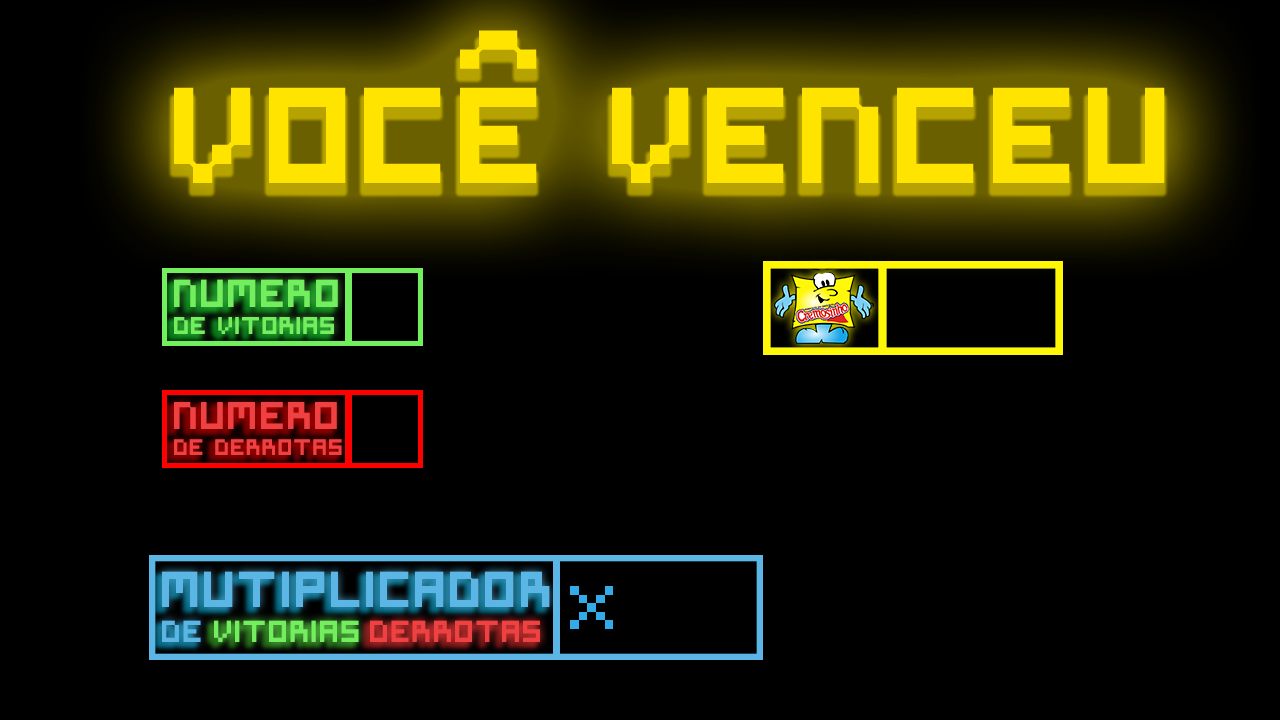
<style>
.page{position:relative;width:1280px;height:720px;background:#000000}
.page>*{position:absolute;margin:0}
.t1{font:23.2px "Symtext";color:#73ee5e}
.t2{font:37.2px "Symtext";color:#73ee5e}
.t3{font:21.6px "Symtext";color:#ef4141}
.t4{font:37px "Symtext";color:#ef4141}
.t5{font:48px "Symtext";color:#5bb6e5}
.t6{font:29px "Symtext";color:#5bb6e5}
.t7{font:29px "Symtext";color:#73ee5e}
.t8{font:29px "Symtext";color:#ef4141}
</style>
<div class="page">
<p class="t1" style="left:174px;top:279px;width:164px;height:55px"><span class="t2">NUMERO <br></span>DE VITORIAS</p>
<p class="t3" style="left:174px;top:402px;width:168px;height:53px"><span class="t4">NUMERO <br></span>DE derrotas</p>
<p class="t5" style="left:162px;top:571px;width:388px;height:71px">Mutiplicador <br><span class="t6">DE</span></p>
<p class="t7" style="left:214px;top:620px;width:145px;height:22px">VITORIAS</p>
<p class="t8" style="left:370px;top:620px;width:170px;height:22px">derrotas</p>
</div>
